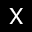
<style>
.page{position:relative;width:32px;height:32px;background:#000000}
.page>*{position:absolute;margin:0}
.t1{font:30px "AndaleMono";color:#ffffff}
</style>
<div class="page">
<p class="t1" style="left:9px;top:8px;width:14px;height:16px">x</p>
</div>
